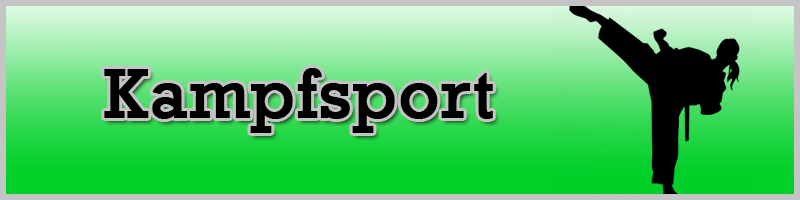
<style>
.page{position:relative;width:800px;height:200px}
.page>*{position:absolute;margin:0}
.t1{font:70px "Rockwell";color:#000000;font-weight:bold}
</style>
<div class="page">
<p class="t1" style="left:104px;top:68px;width:389px;height:65px">Kampfsport</p>
</div>
